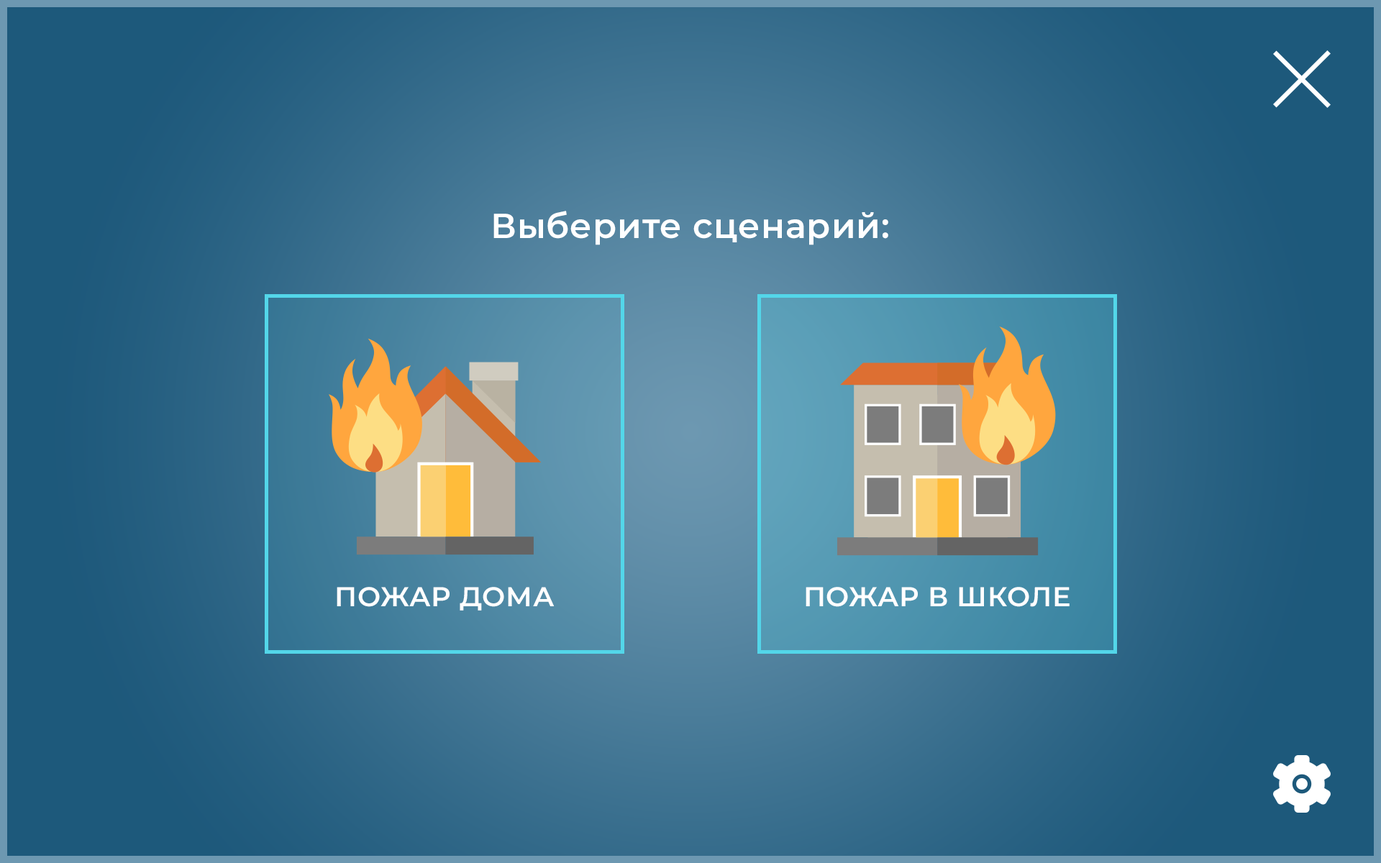
<style>
.page{position:relative;width:1381px;height:863px}
.page>*{position:absolute;margin:0}
.t1{font:34.5px "Montserrat-SemiBold";letter-spacing:0.02em;color:#ffffff}
.t2{font:27.4px "Montserrat-SemiBold";letter-spacing:0.02em;color:#ffffff;text-transform:uppercase}
</style>
<div class="page">
<p class="t1" style="left:494px;top:211px;width:394px;height:34px">Выберите сценарий:</p>
<p class="t2" style="left:337px;top:587px;width:218px;height:24px">Пожар дома</p>
<p class="t2" style="left:806px;top:587px;width:264px;height:20px">Пожар в школе</p>
</div>
